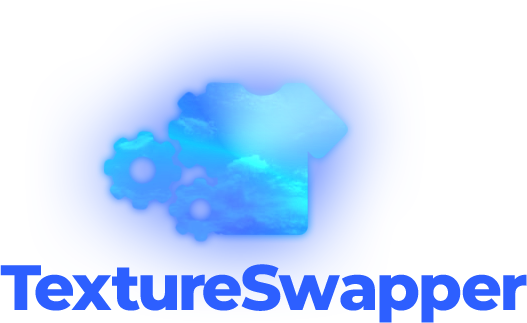
<style>
.page{position:relative;width:527px;height:323px;background:#ffffff}
.page>*{position:absolute;margin:0}
.t1{font:64px "MontserratRoman-ExtraBold";color:#2d5fff;font-weight:bold}
</style>
<div class="page">
<p class="t1" style="left:0px;top:264px;width:527px;height:59px">TextureSwapper</p>
</div>
